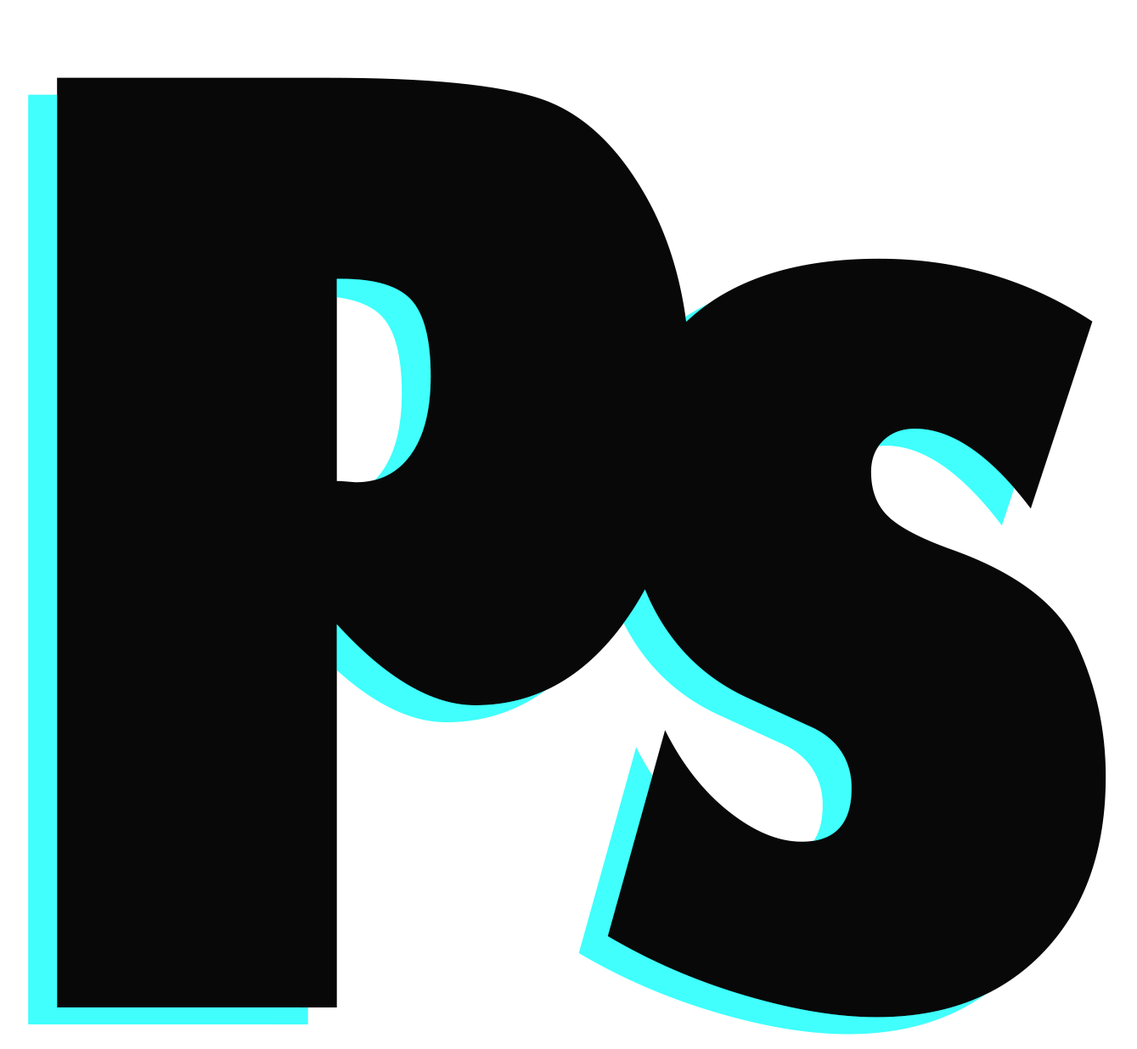
<style>
.page{position:relative;width:1137px;height:1049px;background:#080808}
.page>*{position:absolute;margin:0}
.t1{font:1247.8px "GillSans-UltraBoldCondensed";letter-spacing:-0.08em;color:#080808}
</style>
<div class="page">
<p class="t1" style="left:57px;top:77px;width:1049px;height:941px">Ps</p>
</div>
